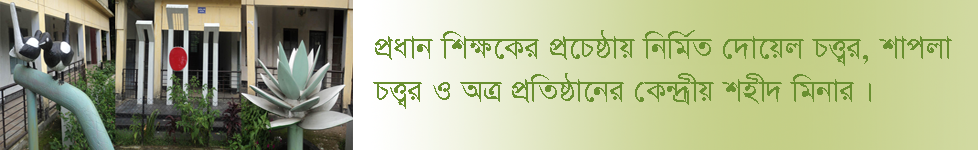
<style>
.page{position:relative;width:978px;height:150px}
.page>*{position:absolute;margin:0}
.t1{font:36px "SutonnyMJ";color:#698f30}
</style>
<div class="page">
<p class="t1" style="left:373px;top:30px;width:579px;height:79px">cÖavb wkÿ‡Ki cÖ‡Pôvq wbwg©Z †`v‡qj PË¡i, kvcjv <br>PË¡i I AÎ cÖwZôv‡bi †K›`ªxq knx` wgbvi|</p>
</div>
